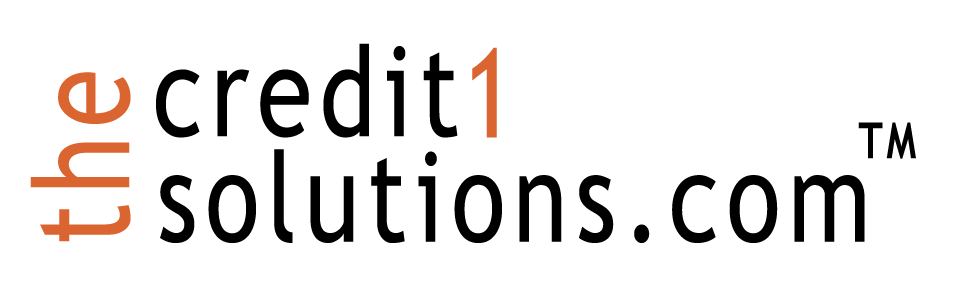
<style>
.page{position:relative;width:971px;height:300px;background:#ffffff}
.page>*{position:absolute;margin:0}
.t1{font:125px "TrebuchetMS";letter-spacing:0.08em;color:#000000;scale:0.8 1}
.t2{font:125px "TrebuchetMS";letter-spacing:0.08em;color:#da6530;scale:0.8 1}
.t3{font:133.4px "TrebuchetMS";letter-spacing:0.08em;color:#da6530;scale:0.8 1}
.t4{font:50px "TrebuchetMS-Bold";letter-spacing:0.08em;color:#000000;scale:0.8 1}
</style>
<div class="page">
<p class="t1" style="left:156px;top:43px;width:302px;height:95px">credit</p>
<p class="t2" style="left:472px;top:47px;width:25px;height:91px">1</p>
<p class="t3" style="left:30px;top:72px;width:101px;height:170px;rotate:-90deg">the</p>
<p class="t4" style="left:858px;top:122px;width:58px;height:37px">TM</p>
<p class="t1" style="left:160px;top:149px;width:705px;height:94px">solutions.com</p>
</div>
